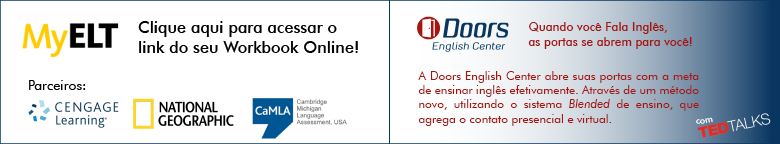
<style>
.page{position:relative;width:780px;height:144px;background:#ffffff}
.page>*{position:absolute;margin:0}
.t1{font:16.2px "FuturaBT-Medium";color:#000000}
.t2{font:12px "FuturaBT-Book";color:#a51611}
.t3{font:12px "FuturaBT-Medium";color:#a51611}
.t4{font:12px "FuturaBT-BookItalic";color:#a51611}
.t5{font:14px "FuturaBT-Book";color:#000000}
.t6{font:9.1px "FuturaBT-Book";color:#ffffff}
</style>
<div class="page">
<p class="t1" style="left:138px;top:21px;width:220px;height:32px">Clique aqui para acessar o<br>link do seu Workbook Online!</p>
<p class="t2" style="left:418px;top:22px;width:281px;height:104px;text-align:justify"><span class="t3">Quando você Fala Inglês,<br>as portas se abrem para você!<br><br></span>A Doors English Center abre suas portas com a meta de ensinar inglês efetivamente. Através de um método novo, utilizando o sistema <span class="t4">Blended</span> de ensino, que agrega o contato presencial e virtual.</p>
<p class="t5" style="left:29px;top:80px;width:57px;height:10px">Parceiros:</p>
<p class="t6" style="left:696px;top:117px;width:17px;height:7px">com</p>
</div>
